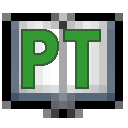
<style>
.page{position:relative;width:128px;height:128px;background:#ffffff}
.page>*{position:absolute;margin:0}
.t1{font:88px "AbadiMT-CondensedExtraBold";color:#339933}
</style>
<div class="page">
<p class="t1" style="left:21px;top:29px;width:80px;height:60px">PT</p>
</div>
